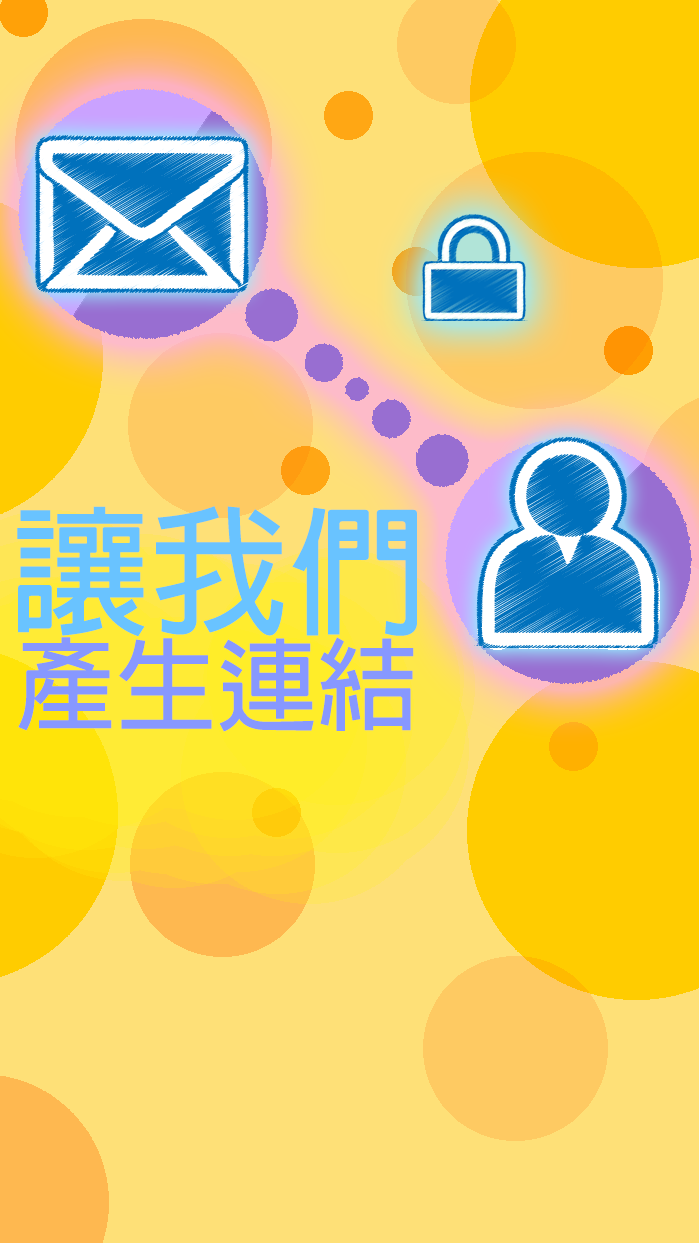
<style>
.page{position:relative;width:699px;height:1243px;background:#fee077}
.page>*{position:absolute;margin:0}
.t1{font:138.8px "AdobeFanHeitiStd-Bold";color:#69c3ff}
.t2{font:100.8px "AdobeFanHeitiStd-Bold";color:#8798ff}
</style>
<div class="page">
<p class="t1" style="left:17px;top:506px;width:400px;height:131px">讓我們</p>
<p class="t2" style="left:18px;top:637px;width:396px;height:95px">產生連結</p>
</div>
